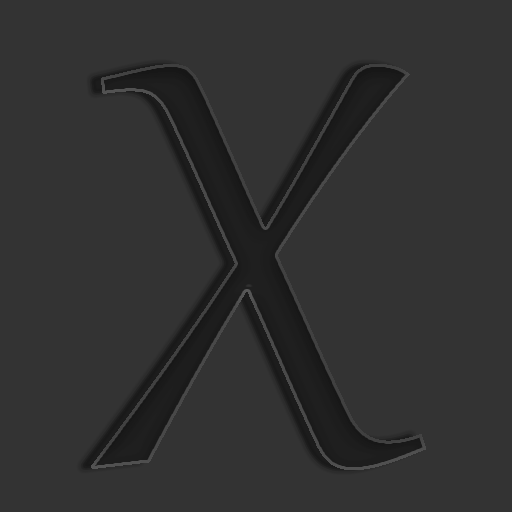
<style>
.page{position:relative;width:512px;height:512px;background:#333333}
.page>*{position:absolute;margin:0}
.t1{font:705.9px "Gabriola";color:#1d1d1d}
</style>
<div class="page">
<p class="t1" style="left:91px;top:64px;width:335px;height:406px">X</p>
</div>
